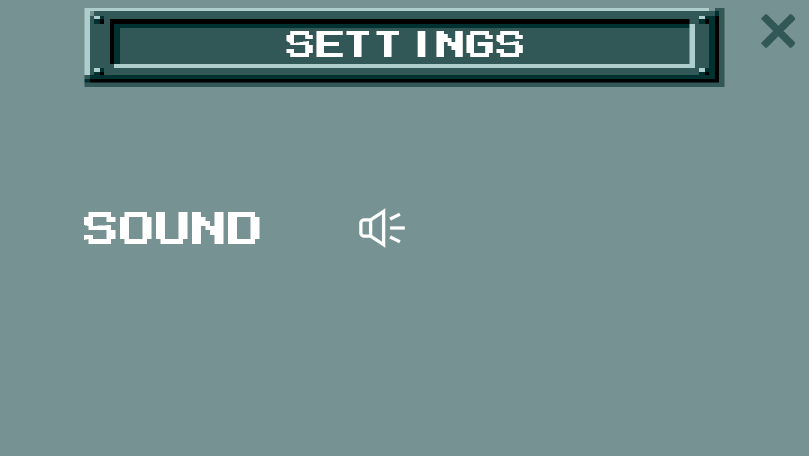
<style>
.page{position:relative;width:809px;height:456px;background:#779292}
.page>*{position:absolute;margin:0}
.t1{font:30px "MMRock9";color:#ffffff}
.t2{font:36px "MMRock9";color:#ffffff}
</style>
<div class="page">
<p class="t1" style="left:286px;top:31px;width:237px;height:26px">SETTINGS</p>
<p class="t2" style="left:84px;top:212px;width:176px;height:32px">SOUND</p>
</div>
